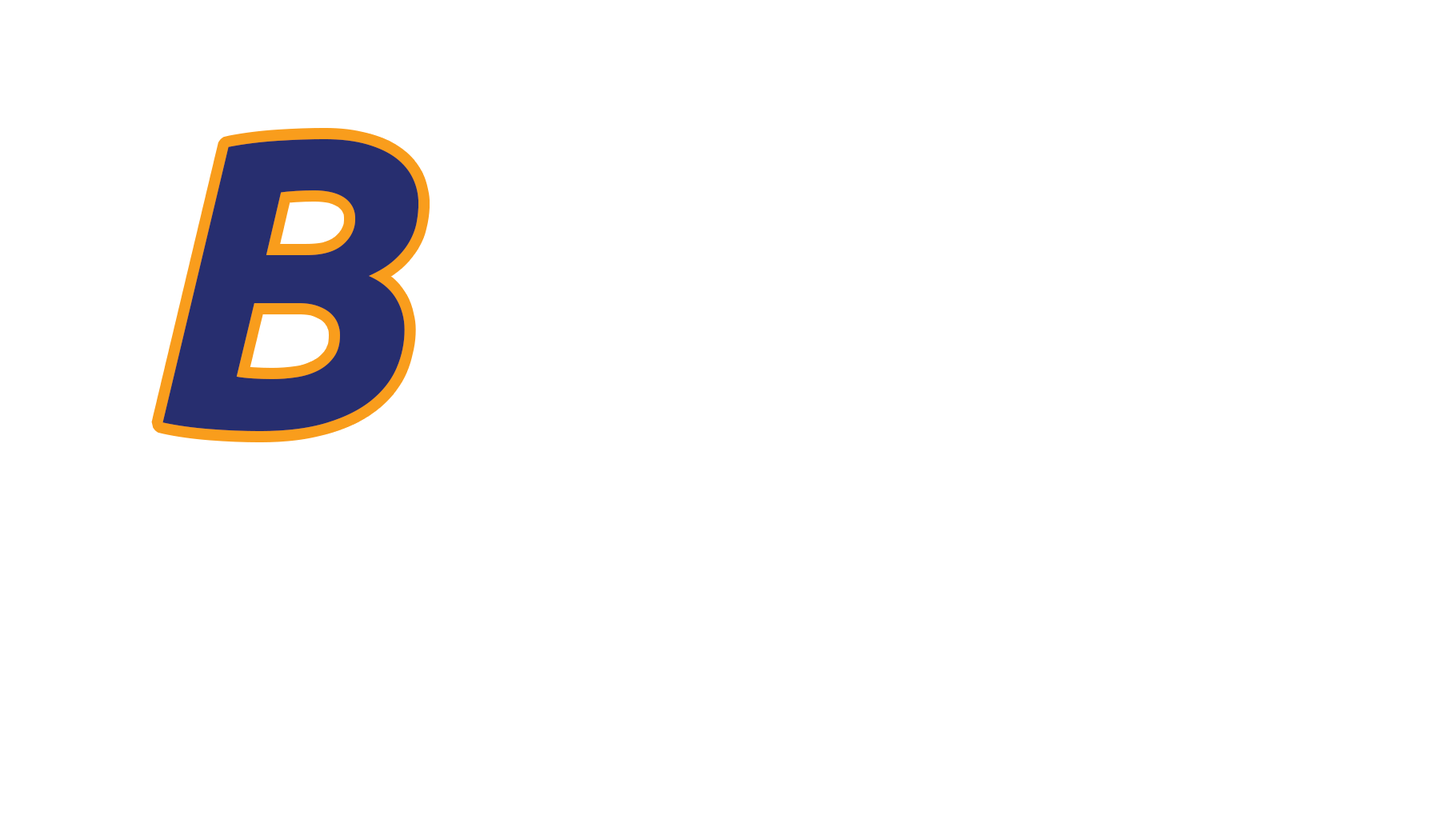
<style>
.page{position:relative;width:1456px;height:819px;background:#ffffff}
.page>*{position:absolute;margin:0}
.t1{font:409.9px "Ubuntu-BoldItalic";letter-spacing:-0.02em;color:#272e6f}
</style>
<div class="page">
<p class="t1" style="left:162px;top:139px;width:256px;height:292px">B</p>
</div>
